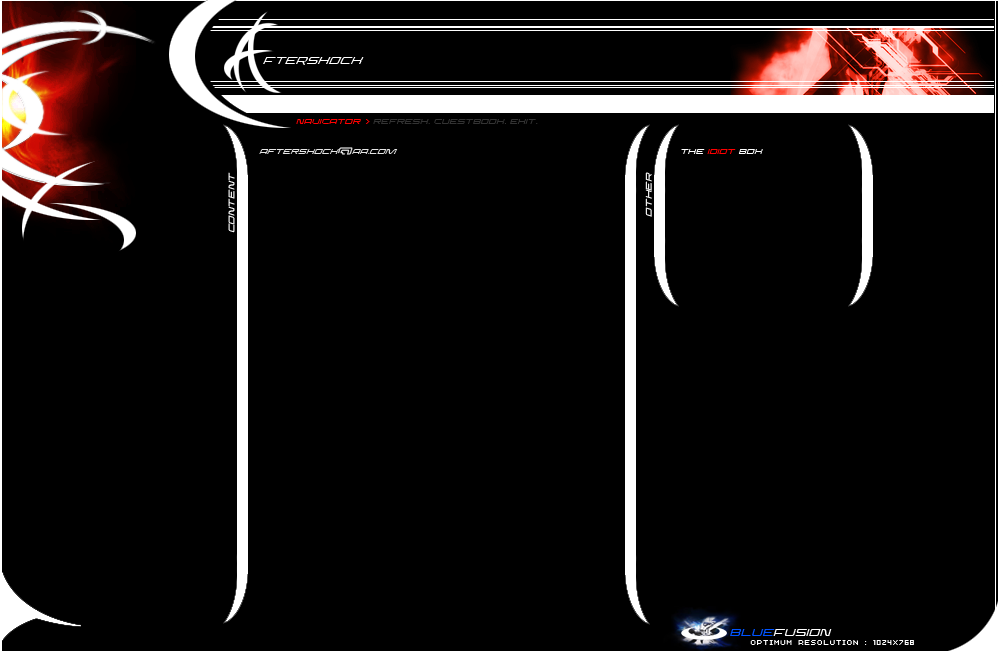
<style>
.page{position:relative;width:1003px;height:651px;background:#000000}
.page>*{position:absolute;margin:0}
.t1{font:14px "DominatorThinItalic";color:#ffffff;text-transform:uppercase;font-style:italic}
.t2{font:10px "DominatorThinItalic";color:#333333;text-transform:uppercase}
.t3{font:10px "DominatorThinItalic";color:#ff0000;text-transform:uppercase}
.t4{font:10px "AuXDotBitC";color:#ff0000;text-transform:uppercase}
.t5{font:10px "DominatorThinItalic";color:#e5e5e5;text-transform:uppercase;font-style:italic}
.t6{font:12px "DominatorThinItalic";color:#e5e5e5;text-transform:uppercase}
.t7{font:10px "DominatorThinItalic";color:#ffffff;text-transform:uppercase}
.t8{font:11px "DominatorThinItalic";color:#ffffff;text-transform:uppercase}
.t9{font:14px "DominatorThinItalic";color:#ffffff;text-transform:uppercase}
.t10{font:14px "DominatorThinItalic";color:#0054ff;text-transform:uppercase}
.t11{font:9px "AuXDotBitC";color:#ffffff;text-transform:uppercase}
</style>
<div class="page">
<p class="t1" style="left:263px;top:57px;width:101px;height:8px">ftershock</p>
<p class="t2" style="left:296px;top:119px;width:242px;height:5px"><span class="t3">Navigator </span><span class="t4">&gt; </span>Refresh. Guestbook. Exit.</p>
<p class="t5" style="left:259px;top:147px;width:139px;height:8px">AFTERSHOCK<span class="t6">@</span>AA.com</p>
<p class="t3" style="left:681px;top:149px;width:82px;height:5px"><span class="t7">The</span> Idiot <span class="t7">Box</span></p>
<p class="t8" style="left:228px;top:172px;width:7px;height:61px;rotate:-90deg">CONTENT</p>
<p class="t8" style="left:645px;top:172px;width:7px;height:45px;rotate:-90deg">Other</p>
<p class="t9" style="left:730px;top:629px;width:102px;height:7px"><span class="t10">BLUE</span>fu5ion</p>
<p class="t11" style="left:750px;top:640px;width:164px;height:5px">Optimum resolution : 1024x768</p>
</div>
